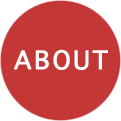
<style>
.page{position:relative;width:121px;height:121px;background:#c43737}
.page>*{position:absolute;margin:0}
.t1{font:24px "Thonburi";letter-spacing:0.1em;color:#fefcfc;font-weight:bold}
</style>
<div class="page">
<p class="t1" style="left:14px;top:49px;width:94px;height:21px">ABOUT</p>
</div>
